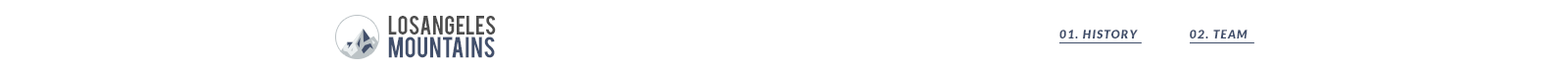
<style>
.page{position:relative;width:1568px;height:73px;background:#ffffff}
.page>*{position:absolute;margin:0}
.t1{font:20.8px/22.4px "Bebas";letter-spacing:0.01em;color:#4d4d4d;text-transform:uppercase}
.t2{font:22.4px/22.4px "Bebas";letter-spacing:0.01em;color:#414f6b;text-transform:uppercase}
.t3{font:11.8px "Lato-BlackItalic";letter-spacing:0.1em;color:#414f6b;text-transform:uppercase}
</style>
<div class="page">
<p class="t1" style="left:388px;top:16px;width:108px;height:42px">LOSANGELES<br><span class="t2">MOUNTAINS</span></p>
<p class="t3" style="left:1059px;top:29px;width:189px;height:9px">01. history               02. team</p>
</div>
